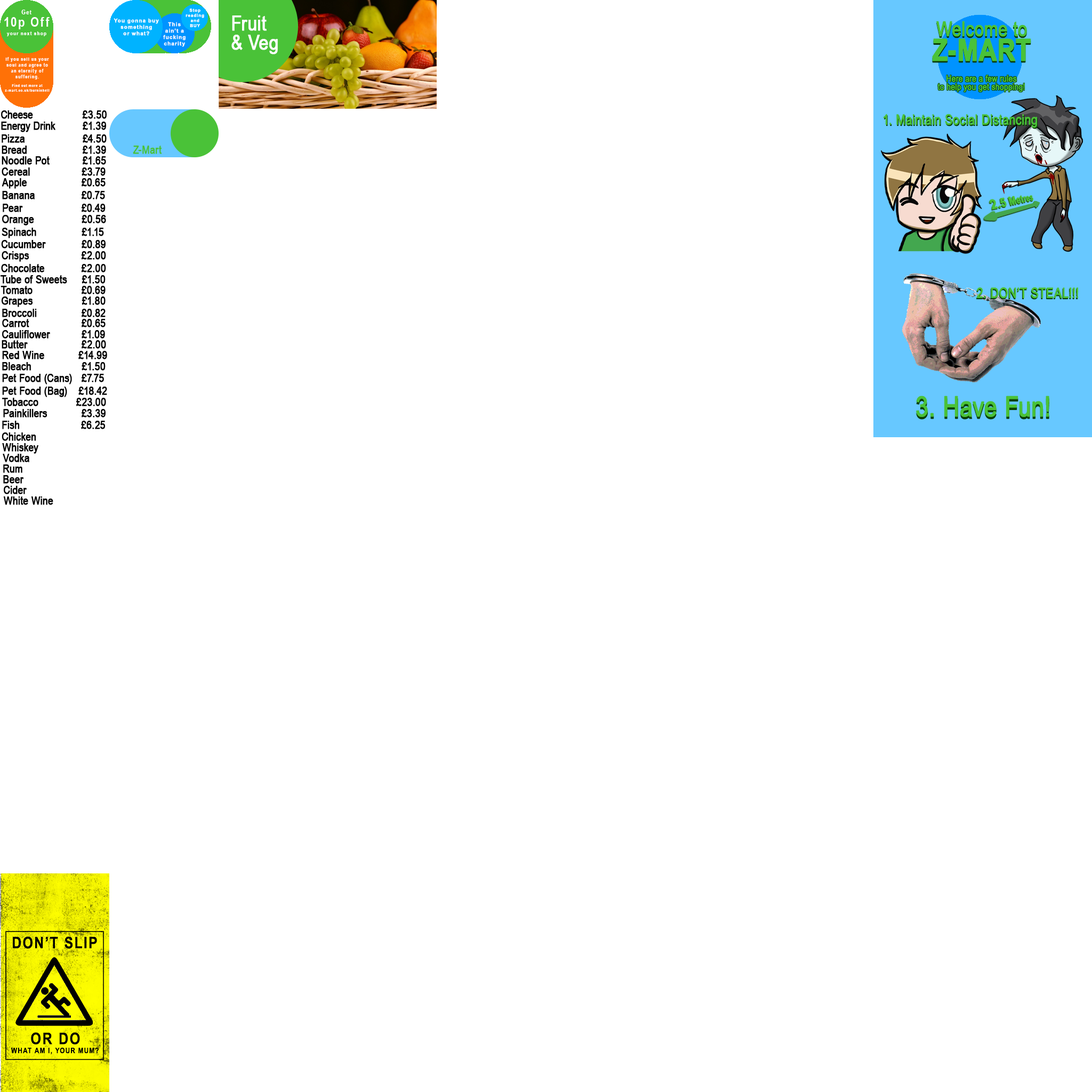
<style>
.page{position:relative;width:1092px;height:1092px;background:#ffffff}
.page>*{position:absolute;margin:0}
.t1{font:13.2px "ArialNarrow-Bold";letter-spacing:0.1em;color:#ffffff}
.t2{font:6.4px "ArialNarrow-Bold";letter-spacing:0.1em;color:#ffffff}
.t3{font:4.3px "Arial-BoldMT";letter-spacing:0.1em;color:#ffffff}
.t4{font:20.8px/18.9px "ArialNarrow";color:#ffffff;font-weight:bold}
.t5{font:5.3px "Arial-BoldMT";letter-spacing:0.1em;color:#ffffff}
.t6{font:20px/24.7px "ArialNarrow";color:#4ac238;font-weight:bold}
.t7{font:30.1px/24.7px "ArialNarrow-Bold";color:#4ac238;font-weight:bold}
.t8{font:5.3px "ArialNarrow-Bold";letter-spacing:0.1em;color:#ffffff}
.t9{font:4.8px "ArialNarrow-Bold";letter-spacing:0.1em;color:#ffffff}
.t10{font:3.7px "ArialNarrow-Bold";letter-spacing:0.1em;color:#ffffff}
.t11{font:9px/8.2px "ArialNarrow";color:#4ac238;font-weight:bold}
.t12{font:11.3px "ArialNarrow";color:#000000;font-weight:bold}
.t13{font:14px "ArialNarrow";color:#4ac238;font-weight:bold}
.t14{font:14px "ArialNarrow";font-weight:bold}
.t15{font:11.3px "ArialNarrow";color:#4ac238;font-weight:bold}
.t16{font:27.8px "ArialNarrow";font-weight:bold}
.t17{font:27.8px "ArialNarrow";color:#4ac238;font-weight:bold}
.t18{font:16px "Arial-BoldMT";letter-spacing:0.1em;color:#000000;scale:0.83 1}
.t19{font:7.5px "Arial-BoldMT";letter-spacing:0.1em;color:#000000;scale:0.85 1}
.t20{font:16px "Arial-BoldMT";letter-spacing:0.1em;color:#000000;scale:0.85 1}
</style>
<div class="page">
<p class="t1" style="left:4px;top:17px;width:46px;height:12px">10p Off</p>
<p class="t2" style="left:21px;top:10px;width:10px;height:4px">Get</p>
<p class="t3" style="left:186px;top:9px;width:18px;height:18px;text-align:center">Stop<br>reading<br>and<br>BUY</p>
<p class="t4" style="left:231px;top:15px;width:47px;height:39px">Fruit <br>&amp; Veg</p>
<p class="t5" style="left:114px;top:18px;width:45px;height:18px;text-align:center">You gonna buy<br>something<br>or what?</p>
<p class="t5" style="left:163px;top:22px;width:23px;height:25px;text-align:center">This<br>ain’t a<br>fucking<br>charity</p>
<p class="t6" style="left:932px;top:22px;width:99px;height:41px;text-align:center">Welcome to<br><span class="t7">Z-MART</span></p>
<p class="t6" style="left:932px;top:21px;width:99px;height:40px;text-align:center">Welcome to<br><span class="t7">Z-MART</span></p>
<p class="t8" style="left:7px;top:31px;width:39px;height:5px">your next shop</p>
<p class="t9" style="left:5px;top:57px;width:45px;height:35px;text-align:center">If you sell us your<br>soul and agree to<br>an eternity of<br>suffering.<br><span class="t10"><br>Find out more at<br>z-mart.co.uk/burninhell</span></p>
<p class="t11" style="left:937px;top:75px;width:88px;height:17px;text-align:center">Here are a few rules<br>to help you get shopping!</p>
<p class="t12" style="left:1px;top:110px;width:32px;height:9px">Cheese</p>
<p class="t12" style="left:82px;top:110px;width:25px;height:9px">£3.50</p>
<p class="t13" style="left:884px;top:114px;width:153px;height:14px">1. Maintain Social Distancing</p>
<p class="t12" style="left:1px;top:122px;width:54px;height:10px">Energy Drink</p>
<p class="t12" style="left:83px;top:122px;width:23px;height:8px">£1.39</p>
<p class="t14" style="left:884px;top:115px;width:154px;height:14px">1. Maintain Social Distancing</p>
<p class="t12" style="left:2px;top:134px;width:23px;height:9px">Pizza</p>
<p class="t12" style="left:83px;top:134px;width:24px;height:9px">£4.50</p>
<p class="t12" style="left:2px;top:146px;width:25px;height:8px">Bread</p>
<p class="t12" style="left:83px;top:146px;width:23px;height:8px">£1.39</p>
<p class="t15" style="left:133px;top:146px;width:29px;height:8px">Z-Mart</p>
<p class="t12" style="left:2px;top:156px;width:48px;height:9px">Noodle Pot</p>
<p class="t12" style="left:83px;top:156px;width:23px;height:9px">£1.65</p>
<p class="t12" style="left:2px;top:167px;width:28px;height:9px">Cereal</p>
<p class="t12" style="left:82px;top:167px;width:24px;height:9px">£3.79</p>
<p class="t12" style="left:2px;top:178px;width:25px;height:11px">Apple</p>
<p class="t12" style="left:82px;top:178px;width:24px;height:9px">£0.65</p>
<p class="t12" style="left:2px;top:191px;width:33px;height:8px">Banana</p>
<p class="t12" style="left:82px;top:191px;width:23px;height:8px">£0.75</p>
<p class="t12" style="left:3px;top:204px;width:20px;height:8px">Pear</p>
<p class="t12" style="left:82px;top:204px;width:24px;height:8px">£0.49</p>
<p class="t12" style="left:2px;top:215px;width:32px;height:11px">Orange</p>
<p class="t12" style="left:82px;top:215px;width:24px;height:8px">£0.56</p>
<p class="t12" style="left:2px;top:228px;width:34px;height:10px">Spinach</p>
<p class="t12" style="left:82px;top:228px;width:22px;height:8px">£1.15</p>
<p class="t12" style="left:1px;top:240px;width:45px;height:8px">Cucumber</p>
<p class="t12" style="left:82px;top:240px;width:24px;height:8px">£0.89</p>
<p class="t12" style="left:2px;top:251px;width:27px;height:11px">Crisps</p>
<p class="t12" style="left:81px;top:251px;width:25px;height:9px">£2.00</p>
<p class="t12" style="left:1px;top:264px;width:44px;height:8px">Chocolate</p>
<p class="t12" style="left:81px;top:264px;width:25px;height:8px">£2.00</p>
<p class="t12" style="left:1px;top:275px;width:66px;height:9px">Tube of Sweets</p>
<p class="t12" style="left:82px;top:275px;width:24px;height:9px">£1.50</p>
<p class="t12" style="left:1px;top:286px;width:32px;height:8px">Tomato</p>
<p class="t12" style="left:82px;top:286px;width:24px;height:8px">£0.69</p>
<p class="t14" style="left:976px;top:288px;width:102px;height:12px">2. DON’T STEAL!!!</p>
<p class="t13" style="left:977px;top:287px;width:101px;height:12px">2. DON’T STEAL!!!</p>
<p class="t12" style="left:1px;top:296px;width:32px;height:11px">Grapes</p>
<p class="t12" style="left:82px;top:296px;width:24px;height:9px">£1.80</p>
<p class="t12" style="left:2px;top:309px;width:35px;height:8px">Broccoli</p>
<p class="t12" style="left:82px;top:309px;width:24px;height:8px">£0.82</p>
<p class="t12" style="left:2px;top:319px;width:27px;height:8px">Carrot</p>
<p class="t12" style="left:82px;top:319px;width:24px;height:8px">£0.65</p>
<p class="t12" style="left:2px;top:340px;width:26px;height:9px">Butter</p>
<p class="t12" style="left:2px;top:330px;width:48px;height:9px">Cauliflower</p>
<p class="t12" style="left:82px;top:330px;width:23px;height:9px">£1.09</p>
<p class="t12" style="left:82px;top:340px;width:24px;height:9px">£2.00</p>
<p class="t12" style="left:2px;top:351px;width:42px;height:8px">Red Wine</p>
<p class="t12" style="left:78px;top:351px;width:29px;height:8px">£14.99</p>
<p class="t12" style="left:2px;top:362px;width:29px;height:9px">Bleach</p>
<p class="t12" style="left:82px;top:362px;width:24px;height:9px">£1.50</p>
<p class="t12" style="left:2px;top:374px;width:70px;height:10px">Pet Food (Cans)</p>
<p class="t12" style="left:82px;top:374px;width:22px;height:8px">£7.75</p>
<p class="t12" style="left:2px;top:387px;width:65px;height:10px">Pet Food (Bag)</p>
<p class="t12" style="left:78px;top:387px;width:29px;height:8px">£18.42</p>
<p class="t12" style="left:2px;top:398px;width:36px;height:8px">Tobacco</p>
<p class="t12" style="left:76px;top:398px;width:30px;height:8px">£23.00</p>
<p class="t16" style="left:916px;top:398px;width:133px;height:22px">3. Have Fun!</p>
<p class="t17" style="left:916px;top:396px;width:133px;height:21px">3. Have Fun!</p>
<p class="t12" style="left:3px;top:409px;width:44px;height:8px">Painkillers</p>
<p class="t12" style="left:82px;top:409px;width:24px;height:8px">£3.39</p>
<p class="t12" style="left:2px;top:421px;width:18px;height:8px">Fish</p>
<p class="t12" style="left:81px;top:421px;width:25px;height:8px">£6.25</p>
<p class="t12" style="left:2px;top:432px;width:34px;height:9px">Chicken</p>
<p class="t12" style="left:2px;top:443px;width:36px;height:11px">Whiskey</p>
<p class="t12" style="left:3px;top:454px;width:26px;height:8px">Vodka</p>
<p class="t12" style="left:3px;top:464px;width:19px;height:9px">Rum</p>
<p class="t12" style="left:3px;top:475px;width:21px;height:9px">Beer</p>
<p class="t12" style="left:4px;top:486px;width:23px;height:8px">Cider</p>
<p class="t12" style="left:3px;top:496px;width:50px;height:9px">White Wine</p>
<p class="t18" style="left:13px;top:936px;width:84px;height:13px">DON’T SLIP</p>
<p class="t19" style="left:11px;top:1032px;width:88px;height:23px;text-align:center"><span class="t20">OR DO<br></span>WHAT AM I, YOUR MUM?</p>
</div>
